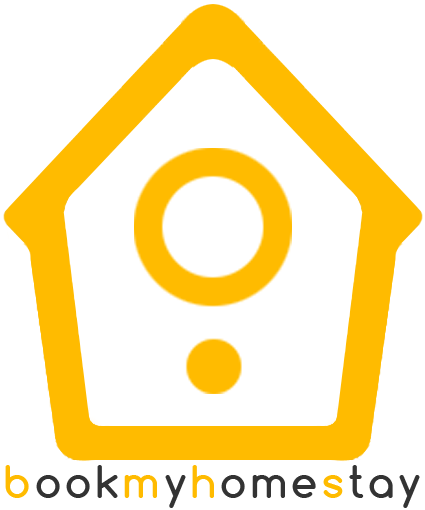
<style>
.page{position:relative;width:425px;height:510px;background:#ffffff}
.page>*{position:absolute;margin:0}
.t1{font:42px "Comfortaa-Bold";letter-spacing:0.105em;color:#333333}
.t2{font:42px "Comfortaa-Bold";letter-spacing:0.105em;color:#ffbb00}
</style>
<div class="page">
<p class="t1" style="left:5px;top:465px;width:415px;height:43px"><span class="t2">b</span>ook<span class="t2">m</span>y<span class="t2">h</span>ome<span class="t2">s</span>tay</p>
</div>
